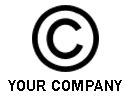
<style>
.page{position:relative;width:130px;height:100px;background:#ffffff}
.page>*{position:absolute;margin:0}
.t1{font:16px "FranklinGothic-Demi";color:#000000}
</style>
<div class="page">
<p class="t1" style="left:8px;top:80px;width:114px;height:11px">YOUR COMPANY</p>
</div>
